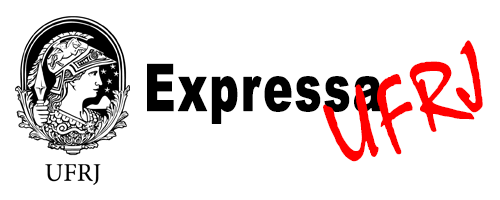
<style>
.page{position:relative;width:500px;height:200px;background:#ffffff}
.page>*{position:absolute;margin:0}
.t1{font:100px "Mistral";color:#ff0000}
.t2{font:65.2px "Arial-Black";letter-spacing:0.025em;color:#000000;font-weight:bold;scale:0.67 1}
</style>
<div class="page">
<p class="t1" style="left:323px;top:40px;width:160px;height:122px;rotate:-24deg">UFRJ</p>
<p class="t2" style="left:147px;top:63px;width:234px;height:61px">Expressa</p>
</div>
